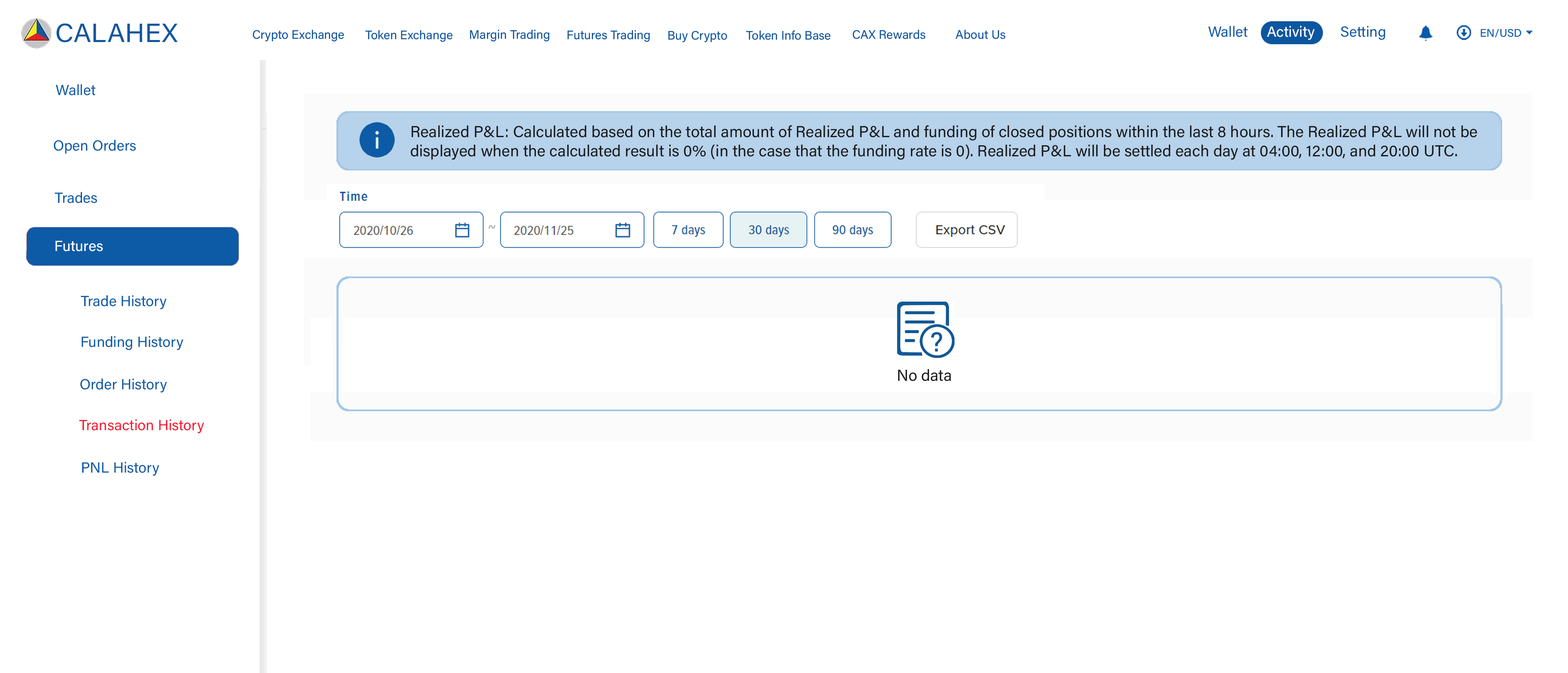
<style>
.page{position:relative;width:1568px;height:673px;background:#ffffff}
.page>*{position:absolute;margin:0}
.t1{font:26.4px "AcuminConcept-Regular";color:#0d57a0;font-style:italic}
.t2{font:12.2px "AcuminConcept-Regular";color:#0d57a0;font-style:italic}
.t3{font:11px "AcuminConcept-Regular";color:#055aaa;font-style:italic}
.t4{font:14.7px "AcuminConcept-Regular";color:#0d5ba6;font-style:italic}
.t5{font:15.9px "AcuminConcept-Regular";color:#191b1b;font-style:italic}
.t6{font:14.7px "AcuminConcept-Regular";color:#ffffff;font-style:italic}
.t7{font:14.7px "AcuminConcept-Regular";color:#f3192e;font-style:italic}
</style>
<div class="page">
<p class="t1" style="left:56px;top:23px;width:122px;height:19px">CALAHEX</p>
<p class="t2" style="left:253px;top:29px;width:91px;height:13px">Crypto Exchange</p>
<p class="t2" style="left:365px;top:30px;width:88px;height:12px">Token Exchange</p>
<p class="t2" style="left:470px;top:29px;width:79px;height:13px">Margin Trading</p>
<p class="t2" style="left:567px;top:30px;width:83px;height:12px">Futures Trading</p>
<p class="t2" style="left:853px;top:29px;width:73px;height:10px">CAX Rewards</p>
<p class="t2" style="left:955px;top:29px;width:51px;height:10px">About Us</p>
<p class="t3" style="left:1481px;top:29px;width:40px;height:9px">EN/USD</p>
<p class="t2" style="left:668px;top:31px;width:59px;height:11px">Buy Crypto</p>
<p class="t2" style="left:746px;top:30px;width:85px;height:10px">Token Info Base</p>
<p class="t4" style="left:56px;top:84px;width:40px;height:12px">Wallet</p>
<p class="t5" style="left:411px;top:125px;width:1066px;height:35px">Realized P&amp;L: Calculated based on the total amount of Realized P&amp;L and funding of closed positions within the last 8 hours. The Realized P&amp;L will not be <br>displayed when the calculated result is 0% (in the case that the funding rate is 0). Realized P&amp;L will be settled each day at 04:00, 12:00, and 20:00 UTC.</p>
<p class="t4" style="left:54px;top:140px;width:82px;height:14px">Open Orders</p>
<p class="t4" style="left:55px;top:192px;width:42px;height:11px">Trades</p>
<p class="t6" style="left:56px;top:241px;width:47px;height:10px">Futures</p>
<p class="t4" style="left:81px;top:295px;width:86px;height:14px">Trade History</p>
<p class="t4" style="left:82px;top:336px;width:101px;height:14px">Funding History</p>
<p class="t5" style="left:898px;top:369px;width:53px;height:12px">No data</p>
<p class="t4" style="left:80px;top:378px;width:87px;height:15px">Order History</p>
<p class="t7" style="left:79px;top:419px;width:125px;height:14px">Transaction History</p>
<p class="t4" style="left:82px;top:462px;width:77px;height:14px">PNL History</p>
</div>
